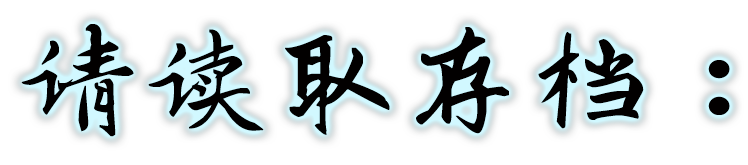
<style>
.page{position:relative;width:748px;height:165px;background:#ffffff}
.page>*{position:absolute;margin:0}
.t1{font:119.4px "SentyZHAO";color:#020000}
</style>
<div class="page">
<p class="t1" style="left:21px;top:24px;width:709px;height:113px">请读取存档：</p>
</div>
